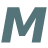
<style>
.page{position:relative;width:48px;height:48px;background:#ffffff}
.page>*{position:absolute;margin:0}
.t1{font:48px "DejaVuSans-Bold";color:#557479;font-style:italic}
</style>
<div class="page">
<p class="t1" style="left:1px;top:7px;width:46px;height:36px">M</p>
</div>
